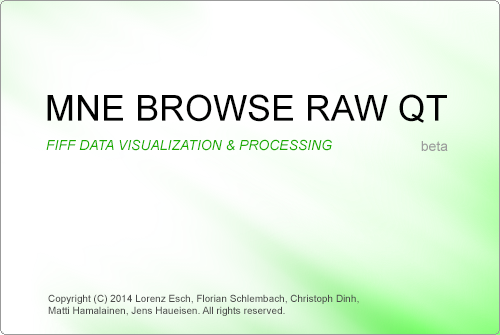
<style>
.page{position:relative;width:500px;height:335px;background:#ffffff}
.page>*{position:absolute;margin:0}
.t1{font:36px "ArialMT";color:#010101;text-transform:uppercase}
.t2{font:14px "Arial-ItalicMT";color:#1cad00;text-transform:uppercase}
.t3{font:14px "ArialMT";color:#9b9b9b}
.t4{font:10px "ArialMT";color:#4b4b4b}
</style>
<div class="page">
<p class="t1" style="left:47px;top:94px;width:400px;height:29px">MNE BROWSE RAW QT</p>
<p class="t2" style="left:46px;top:139px;width:286px;height:12px">fiff Data Visualization &amp; processing</p>
<p class="t3" style="left:421px;top:141px;width:27px;height:10px">beta</p>
<p class="t4" style="left:48px;top:294px;width:311px;height:22px">Copyright (C) 2014 Lorenz Esch, Florian Schlembach, Christoph Dinh, <br>Matti Hamalainen, Jens Haueisen. All rights reserved.</p>
</div>
